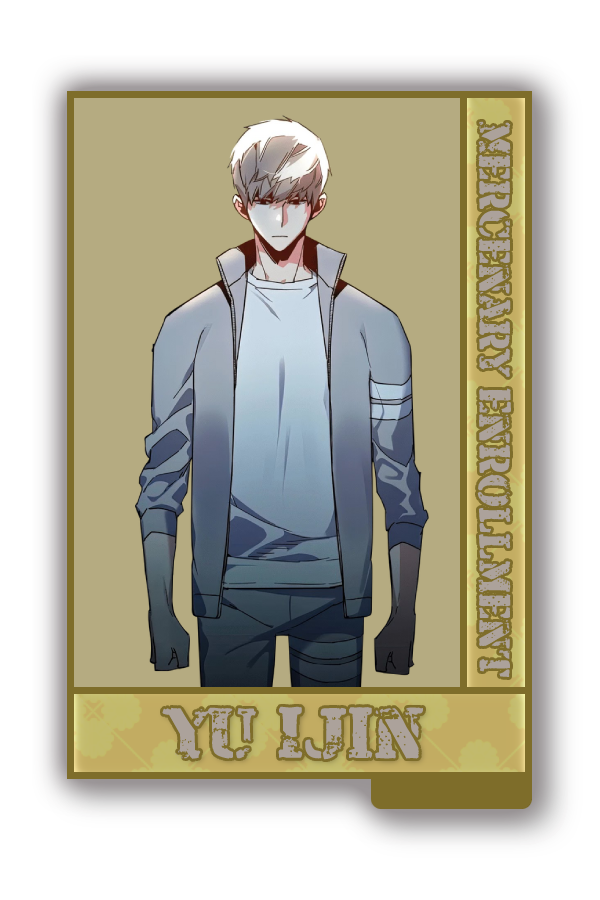
<style>
.page{position:relative;width:600px;height:900px;background:#b5ab81}
.page>*{position:absolute;margin:0}
.t1{font:45px "ArmaliteRifle";color:#aca29b}
.t2{font:75px "ArmaliteRifle";color:#aca29b}
</style>
<div class="page">
<p class="t1" style="left:477px;top:121px;width:34px;height:556px;rotate:90deg">Mercenary Enrollment</p>
<p class="t2" style="left:162px;top:706px;width:262px;height:54px">Yu Ijin</p>
</div>
